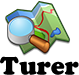
<style>
.page{position:relative;width:79px;height:75px;background:#ffffff}
.page>*{position:absolute;margin:0}
.t1{font:25px "CooperBlackStd";color:#000000}
</style>
<div class="page">
<p class="t1" style="left:0px;top:56px;width:79px;height:19px">Turer</p>
</div>
